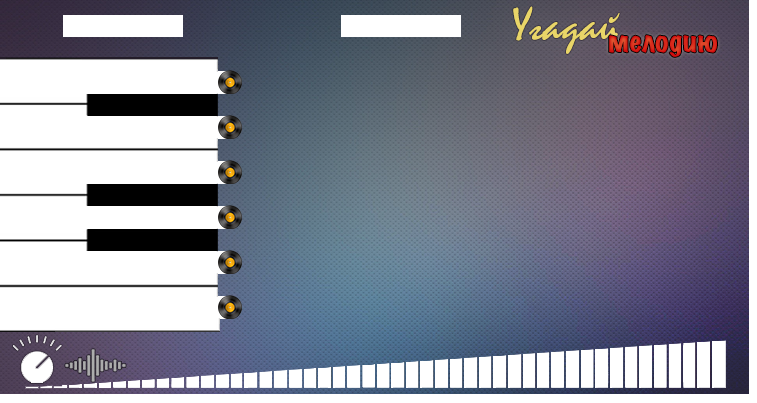
<style>
.page{position:relative;width:757px;height:403px;background:#ffffff}
.page>*{position:absolute;margin:0}
.t1{font:48px "Mistral";color:#e9d568}
.t2{font:26.7px "MarkerFelt-Wide";color:#d7281a}
</style>
<div class="page">
<p class="t1" style="left:513px;top:6px;width:107px;height:48px">Угадай</p>
<p class="t2" style="left:609px;top:35px;width:108px;height:22px">мелодию</p>
</div>
